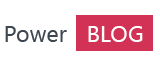
<style>
.page{position:relative;width:160px;height:60px;background:#ffffff}
.page>*{position:absolute;margin:0}
.t1{font:23px "SegoeUI";letter-spacing:0.01em;color:#3e4651}
.t2{font:23px "SegoeUI";letter-spacing:0.01em;color:#ffffff}
</style>
<div class="page">
<p class="t1" style="left:5px;top:26px;width:138px;height:16px">Power<span class="t2">   BLOG</span></p>
</div>
